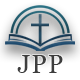
<style>
.page{position:relative;width:80px;height:80px;background:#ffffff}
.page>*{position:absolute;margin:0}
.t1{font:25px "Georgia";letter-spacing:0.04em;color:#3d3d3d}
</style>
<div class="page">
<p class="t1" style="left:17px;top:55px;width:46px;height:18px">JPP</p>
</div>
